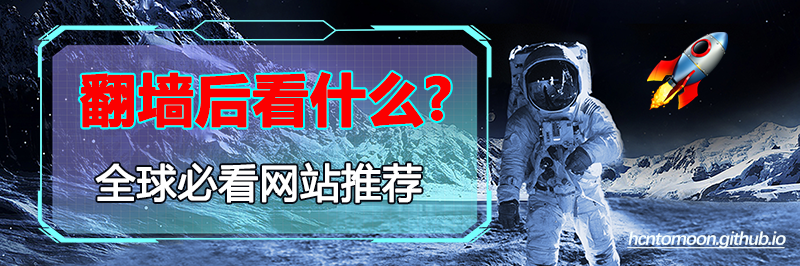
<style>
.page{position:relative;width:800px;height:266px}
.page>*{position:absolute;margin:0}
.t1{font:55.6px "MicrosoftYaHei-Bold";letter-spacing:0.005em;color:#fc0000;font-weight:bold}
.t2{font:39.6px "MicrosoftYaHei";letter-spacing:0.005em;color:#ffffff;font-weight:bold}
.t3{font:18.4px "DengXian-Bold";letter-spacing:-0.055em;color:#f6ffff;font-style:italic;text-decoration:underline}
</style>
<div class="page">
<p class="t1" style="left:79px;top:71px;width:372px;height:57px">翻墙后看什么?</p>
<p class="t2" style="left:95px;top:162px;width:327px;height:41px">全球必看网站推荐</p>
<p class="t3" style="left:627px;top:231px;width:159px;height:18px">hcntomoon.github.io</p>
</div>
